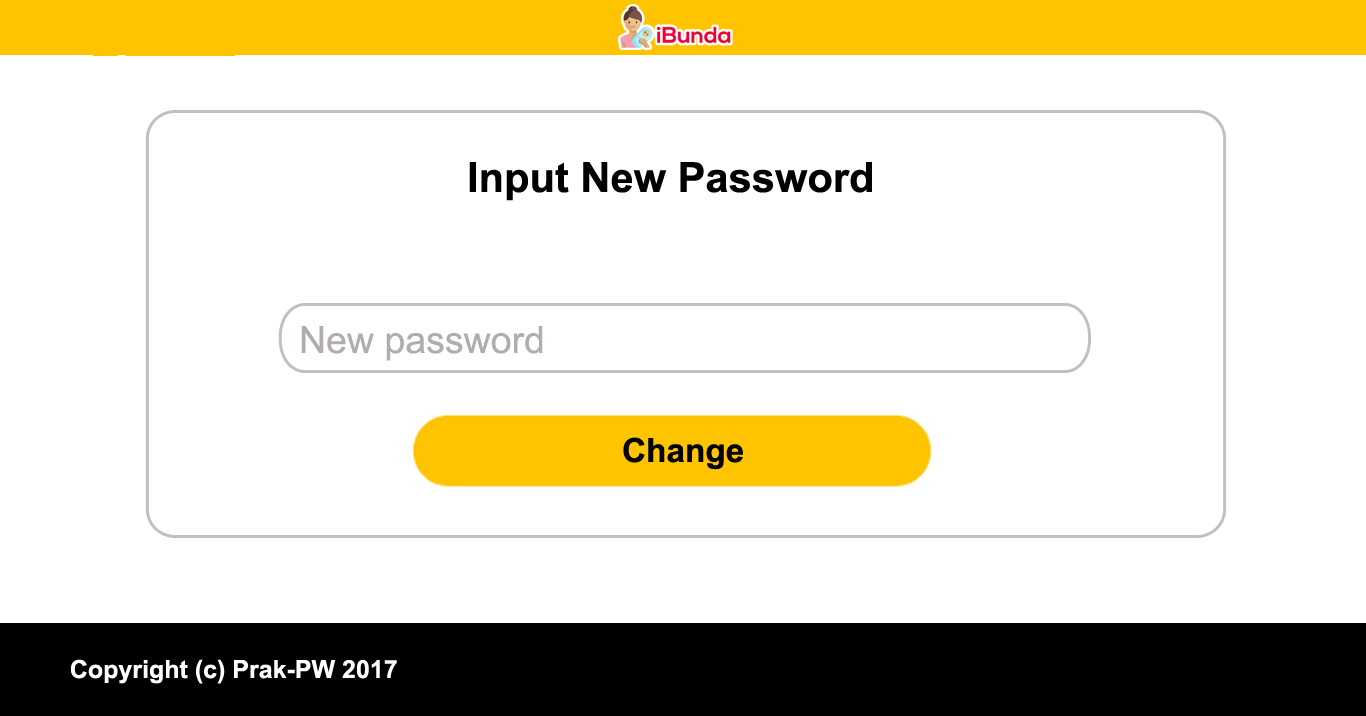
<style>
.page{position:relative;width:1366px;height:716px;background:#ffffff}
.page>*{position:absolute;margin:0}
.t1{font:41.7px "Arial-BoldMT";color:#000000}
.t2{font:37.5px "ArialMT";color:#b1adad}
.t3{font:33.3px "Arial-BoldMT";color:#000000}
.t4{font:25px "Arial-BoldMT";color:#ffffff}
</style>
<div class="page">
<p class="t1" style="left:469px;top:162px;width:403px;height:39px">Input New Password</p>
<p class="t2" style="left:301px;top:326px;width:242px;height:35px">New password</p>
<p class="t3" style="left:623px;top:437px;width:120px;height:33px">Change</p>
<p class="t4" style="left:70px;top:659px;width:327px;height:25px">Copyright (c) Prak-PW 2017</p>
</div>
